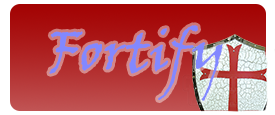
<style>
.page{position:relative;width:275px;height:115px}
.page>*{position:absolute;margin:0}
.t1{font:55px "VinerHandITC";color:#8288ff}
</style>
<div class="page">
<p class="t1" style="left:49px;top:25px;width:174px;height:76px">Fortify</p>
</div>
